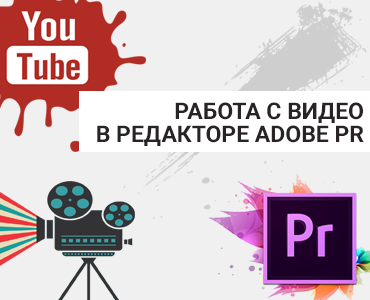
<style>
.page{position:relative;width:370px;height:300px;background:#f0f0f0}
.page>*{position:absolute;margin:0}
.t1{font:23px/23px "Roboto-Bold";color:#292326;text-transform:uppercase}
</style>
<div class="page">
<p class="t1" style="left:97px;top:102px;width:267px;height:44px;text-align:right">Работа с видео<br>в редакторе adobe pr</p>
</div>
